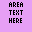
<style>
.page{position:relative;width:32px;height:32px;background:#e69ff5}
.page>*{position:absolute;margin:0}
.t1{font:8px/8px "PixelSix14";color:#000000}
</style>
<div class="page">
<p class="t1" style="left:9px;top:2px;width:14px;height:21px;text-align:center">Area<br>Text<br>Here</p>
</div>
